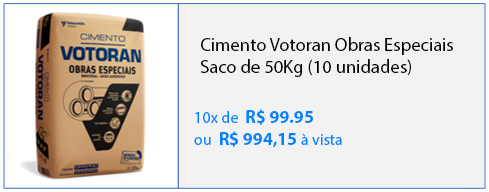
<style>
.page{position:relative;width:489px;height:192px;background:#f2f2f2}
.page>*{position:absolute;margin:0}
.t1{font:18.6px "MyriadPro-Regular";color:#000000}
.t2{font:18px "MyriadPro-Bold";color:#0084ff}
.t3{font:16px "MyriadPro-Regular";color:#0084ff}
</style>
<div class="page">
<p class="t1" style="left:200px;top:37px;width:253px;height:40px">Cimento Votoran Obras Especiais <br>Saco de 50Kg (10 unidades)</p>
<p class="t2" style="left:194px;top:109px;width:148px;height:38px"><span class="t3">10x de  </span>R$ 99.95<br><span class="t3">ou  </span>R$ 994,15 <span class="t3">à vista</span></p>
</div>
